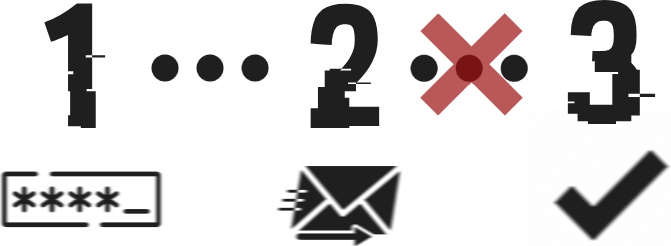
<style>
.page{position:relative;width:671px;height:246px;background:#ffffff}
.page>*{position:absolute;margin:0}
.t1{font:177.8px "HACKED";color:#1f1f1f}
</style>
<div class="page">
<p class="t1" style="left:44px;top:3px;width:62px;height:125px">1</p>
<p class="t1" style="left:310px;top:3px;width:70px;height:125px">2</p>
<p class="t1" style="left:567px;top:0px;width:89px;height:124px">3</p>
</div>
